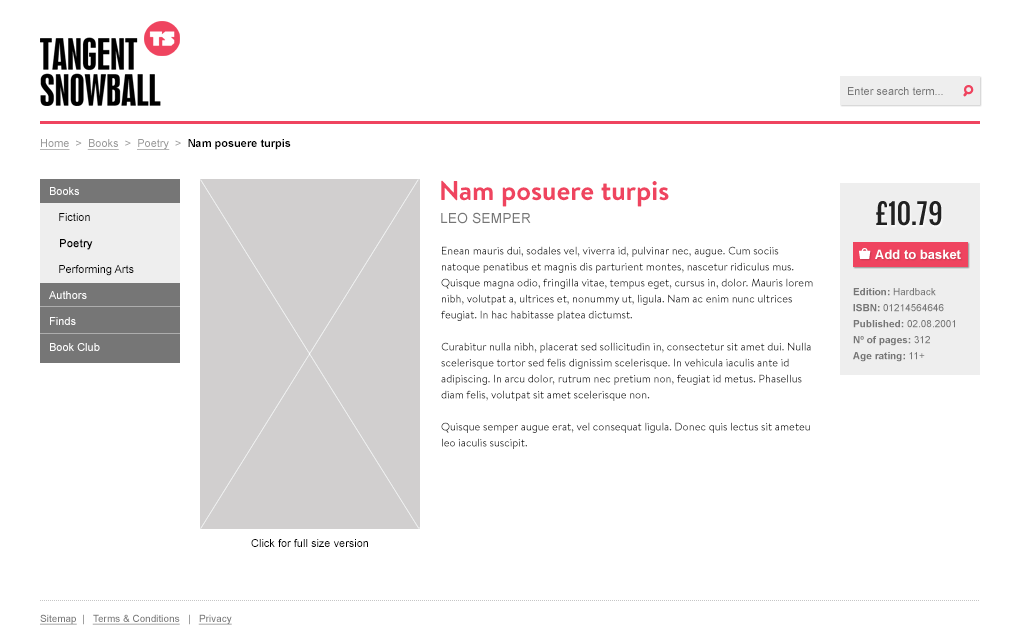
<style>
.page{position:relative;width:1020px;height:640px;background:#ffffff}
.page>*{position:absolute;margin:0}
.t1{font:11px "ArialMT";color:#767676}
.t2{font:18px "Snowcone-Regular";color:#ef445f}
.t3{font:11px "Arial-BoldMT";color:#000000}
.t4{font:11px "ArialMT";color:#999999;text-decoration:underline}
.t5{font:11px "ArialMT";color:#999999}
.t6{font:27px "BrandonText-Bold";color:#ef445f}
.t7{font:27px "Oswald";color:#212121}
.t8{font:14px "ArialMT";color:#767676;text-transform:uppercase}
.t9{font:11px/16px "BrandonText-Regular";color:#000000}
.t10{font:17px "Snowcone-Regular";color:#ffffff}
.t11{font:13px "Arial-BoldMT";color:#ffffff}
.t12{font:10px/16px "Arial-BoldMT";color:#767676}
.t13{font:10px/16px "ArialMT";color:#767676}
.t14{font:11px "ArialMT";color:#000000}
.t15{font:10px "ArialMT";color:#787878;text-decoration:underline}
.t16{font:10px "ArialMT";color:#787878}
</style>
<div class="page">
<p class="t1" style="left:848px;top:87px;width:95px;height:8px">Enter search term...</p>
<p class="t2" style="left:963px;top:85px;width:11px;height:12px">Q</p>
<p class="t3" style="left:40px;top:139px;width:251px;height:11px"><span class="t4">Home</span><span class="t5">  &gt;  </span><span class="t4">Books</span><span class="t5">  &gt;  </span><span class="t4">Poetry</span><span class="t5">  &gt;  </span>Nam posuere turpis</p>
<p class="t6" style="left:441px;top:180px;width:228px;height:27px">Nam posuere turpis</p>
<p class="t7" style="left:876px;top:201px;width:66px;height:25px">£10.79</p>
<p class="t8" style="left:441px;top:212px;width:90px;height:12px">Leo Semper</p>
<p class="t9" style="left:441px;top:246px;width:372px;height:203px">Enean mauris dui, sodales vel, viverra id, pulvinar nec, augue. Cum sociis natoque penatibus et magnis dis parturient montes, nascetur ridiculus mus. Quisque magna odio, fringilla vitae, tempus eget, cursus in, dolor. Mauris lorem nibh, volutpat a, ultrices et, nonummy ut, ligula. Nam ac enim nunc ultrices feugiat. In hac habitasse platea dictumst. <br><br>Curabitur nulla nibh, placerat sed sollicitudin in, consectetur sit amet dui. Nulla scelerisque tortor sed felis dignissim scelerisque. In vehicula iaculis ante id adipiscing. In arcu dolor, rutrum nec pretium non, feugiat id metus. Phasellus diam felis, volutpat sit amet scelerisque non.<br><br>Quisque semper augue erat, vel consequat ligula. Donec quis lectus sit ameteu leo iaculis suscipit.</p>
<p class="t10" style="left:859px;top:248px;width:12px;height:11px">V</p>
<p class="t11" style="left:875px;top:249px;width:86px;height:10px">Add to basket</p>
<p class="t12" style="left:853px;top:288px;width:102px;height:74px">Edition: <span class="t13">Hardback<br></span>ISBN: <span class="t13">01214564646<br></span>Published: <span class="t13">02.08.2001<br></span>Nº of pages: <span class="t13">312<br></span>Age rating: <span class="t13">11+</span></p>
<p class="t14" style="left:251px;top:539px;width:117px;height:8px">Click for full size version</p>
<p class="t15" style="left:40px;top:614px;width:192px;height:11px">Sitemap<span class="t16">  |   </span>Terms &amp; Conditions<span class="t16">   |   </span>Privacy</p>
</div>
